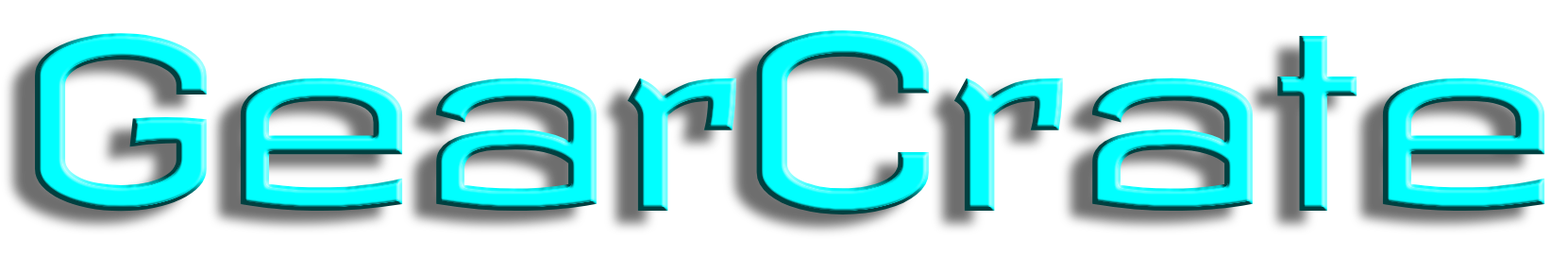
<style>
.page{position:relative;width:1568px;height:257px;background:#ffffff}
.page>*{position:absolute;margin:0}
.t1{font:238.1px "Revalia-Regular"}
</style>
<div class="page">
<p class="t1" style="left:35px;top:30px;width:1510px;height:184px">GearCrate</p>
</div>
